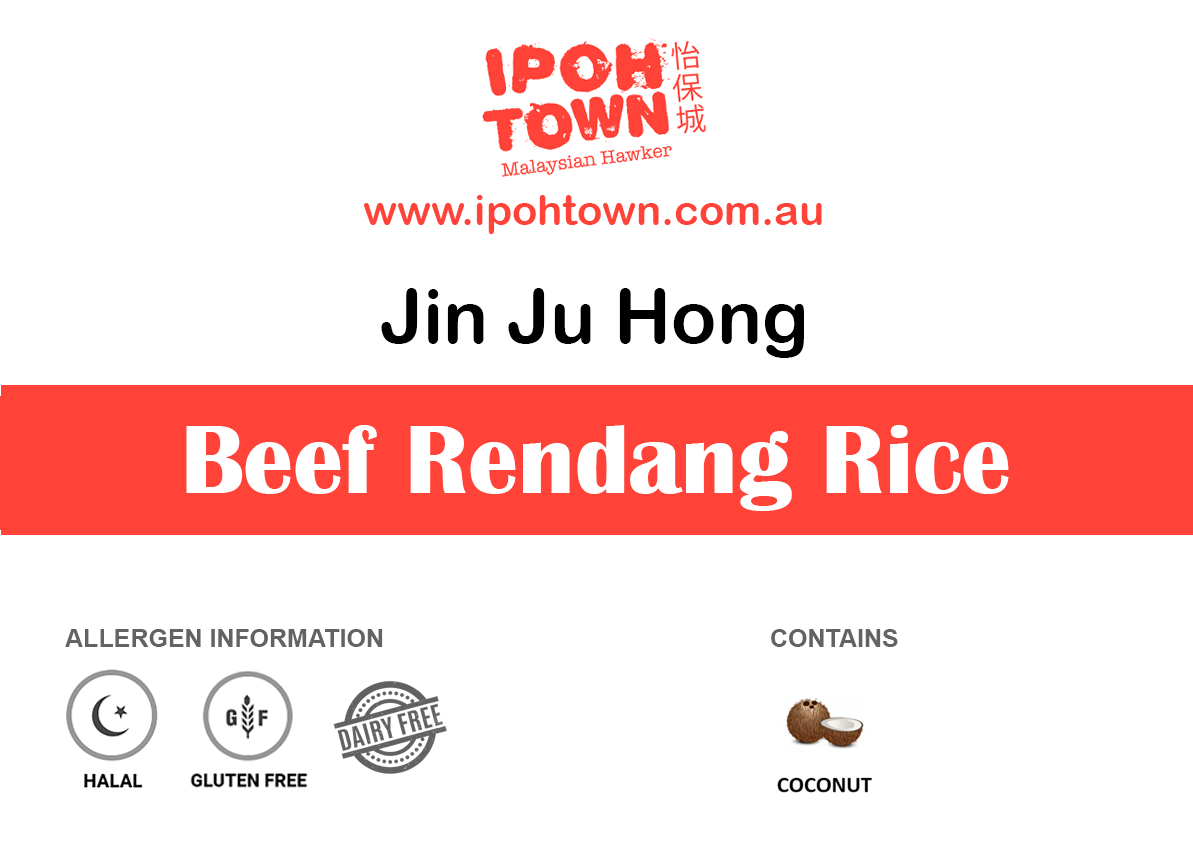
<style>
.page{position:relative;width:1193px;height:850px;background:#ffffff}
.page>*{position:absolute;margin:0}
.t1{font:41.7px "ArialRoundedMTBold";color:#ff4338}
.t2{font:75px "ArialRoundedMTBold";color:#000000}
.t3{font:100px "BritannicBold";color:#ffffff}
.t4{font:25px "Arial-BoldMT";color:#636363}
</style>
<div class="page">
<p class="t1" style="left:364px;top:195px;width:458px;height:39px">www.ipohtown.com.au</p>
<p class="t2" style="left:381px;top:288px;width:423px;height:70px">Jin Ju Hong</p>
<p class="t3" style="left:186px;top:425px;width:823px;height:86px">Beef Rendang Rice</p>
<p class="t4" style="left:65px;top:629px;width:318px;height:18px">ALLERGEN INFORMATION</p>
<p class="t4" style="left:771px;top:629px;width:127px;height:18px">CONTAINS</p>
</div>
